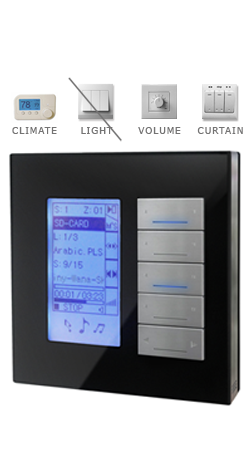
<style>
.page{position:relative;width:250px;height:456px;background:#ffffff}
.page>*{position:absolute;margin:0}
.t1{font:9px "Verdana";letter-spacing:0.1em;color:#747373}
</style>
<div class="page">
<p class="t1" style="left:12px;top:127px;width:45px;height:7px">CLIMATE</p>
<p class="t1" style="left:81px;top:127px;width:32px;height:7px">LIGHT</p>
<p class="t1" style="left:138px;top:127px;width:43px;height:7px">VOLUME</p>
<p class="t1" style="left:197px;top:127px;width:46px;height:7px">CURTAIN</p>
</div>
